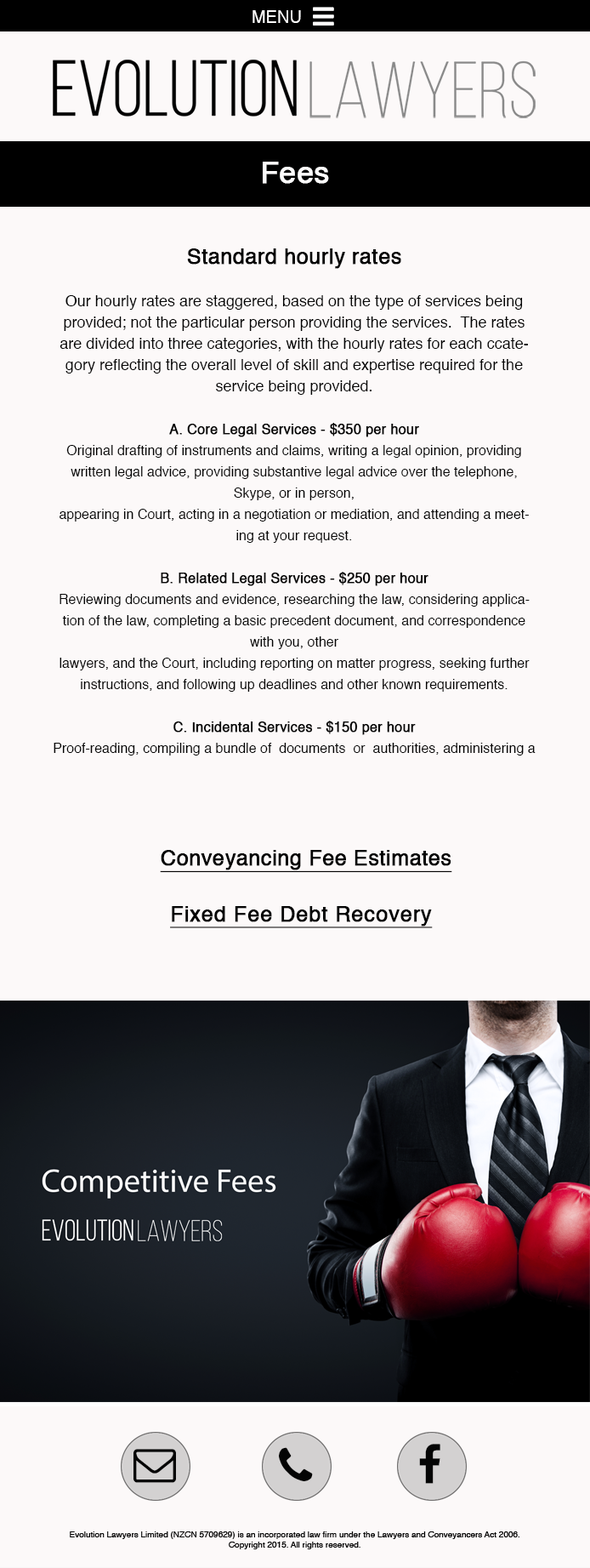
<style>
.page{position:relative;width:590px;height:1568px;background:#fcf9f9}
.page>*{position:absolute;margin:0}
.t1{font:17px "Helvetica";color:#fdfcfc}
.t2{font:29.8px "Helvetica";color:#fdfcfc;font-weight:bold}
.t3{font:13.6px/21.3px "Helvetica";color:#040404}
.t4{font:21.3px/21.3px "Helvetica";color:#040404;font-weight:bold}
.t5{font:15.3px/21.3px "Helvetica";color:#040404}
.t6{font:13.6px/21.3px "Helvetica";color:#040404;font-weight:bold}
.t7{font:13.6px/21.3px "Helvetica";color:#040404;font-style:italic}
.t8{font:21.3px "Helvetica";color:#040404;font-weight:bold;text-decoration:underline}
.t9{font:21.3px "Helvetica";letter-spacing:0.016em;color:#040404;font-weight:bold;text-decoration:underline}
</style>
<div class="page">
<p class="t1" style="left:253px;top:10px;width:48px;height:13px">MENU</p>
<p class="t2" style="left:263px;top:162px;width:66px;height:22px">Fees</p>
<p class="t3" style="left:54px;top:248px;width:482px;height:507px;text-align:center"><span class="t4">Standard hourly rates<br><br></span><span class="t5">Our hourly rates are staggered, based on the type of services being provided; not the particular person providing the services.  The rates are divided into three categories, with the hourly rates for each ccategory reflecting the overall level of skill and expertise required for the service being provided.<br><br></span><span class="t6">A. Core Legal Services - $350 per hour<br></span>Original drafting of instruments and claims, writing a legal opinion, providing written legal advice, providing substantive legal advice over the telephone, Skype, or in person, <br>appearing in Court, acting in a negotiation or mediation, and attending a meeting at your request. <br> <br><span class="t6">B. Related Legal Services - $250 per hour<br></span>Reviewing documents and evidence, researching the law, considering application of the law, completing a basic precedent document, and correspondence with you, other <br>lawyers, and the Court, including reporting on matter progress, seeking further <br>instructions, and following up deadlines and other known requirements.  <br><br><span class="t6">C. Incidental Services - $150 per hour<br></span>Proof-­reading, compiling a bundle of  documents  or  authorities, administering a <br>data room, and general matter management.<br><br><span class="t7">*Hourly rates are excluding GST</span></p>
<p class="t8" style="left:160px;top:850px;width:293px;height:23px">Conveyancing Fee Estimates</p>
<p class="t9" style="left:170px;top:906px;width:263px;height:22px">Fixed Fee Debt Recovery</p>
</div>
